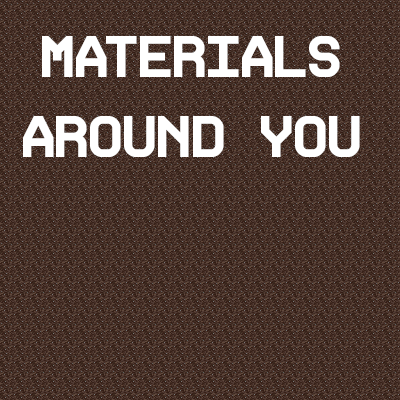
<style>
.page{position:relative;width:400px;height:400px;background:#513b34}
.page>*{position:absolute;margin:0}
.t1{font:66.7px "ProFontWindows-Bold";color:#ffffff}
</style>
<div class="page">
<p class="t1" style="left:23px;top:36px;width:337px;height:121px;text-align:center">MATERIALS<br>AROUND YOU</p>
</div>
